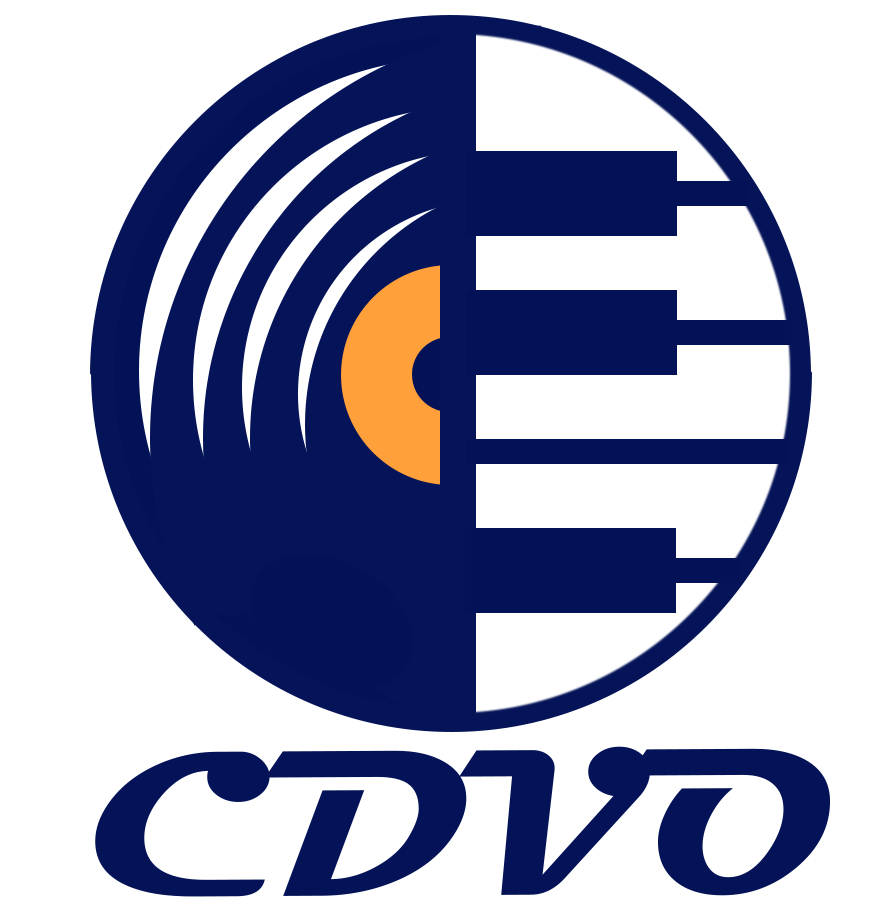
<style>
.page{position:relative;width:875px;height:912px;background:#ffffff}
.page>*{position:absolute;margin:0}
.t1{font:157.9px "Magneto-Bold";color:#041358;scale:1.13 1}
</style>
<div class="page">
<p class="t1" style="left:95px;top:746px;width:735px;height:151px">CDVO</p>
</div>
